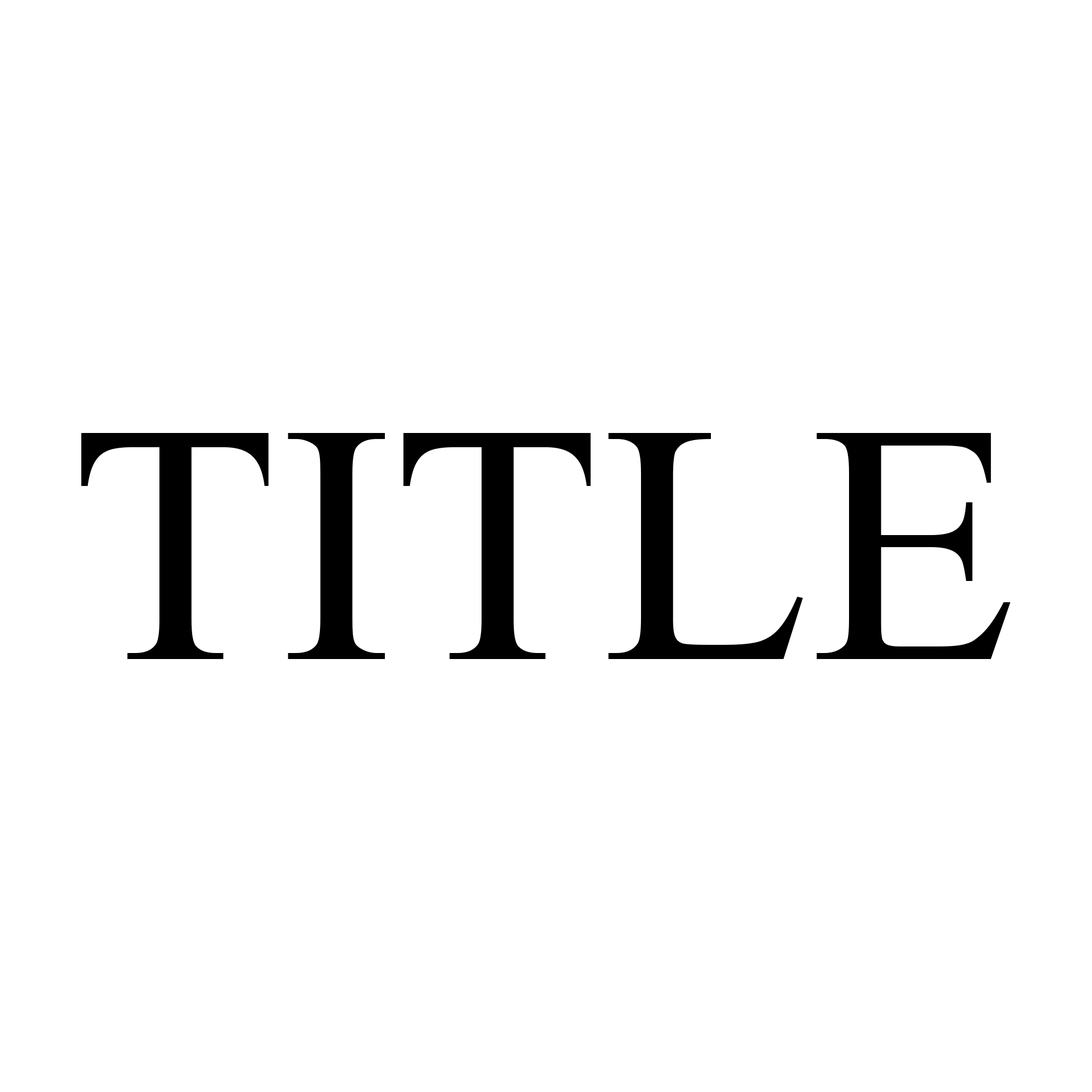
<style>
.page{position:relative;width:1092px;height:1092px;background:#ffffff}
.page>*{position:absolute;margin:0}
.t1{font:341.2px "MongolianBaiti";color:#000000}
</style>
<div class="page">
<p class="t1" style="left:81px;top:433px;width:930px;height:226px">TITLE</p>
</div>
